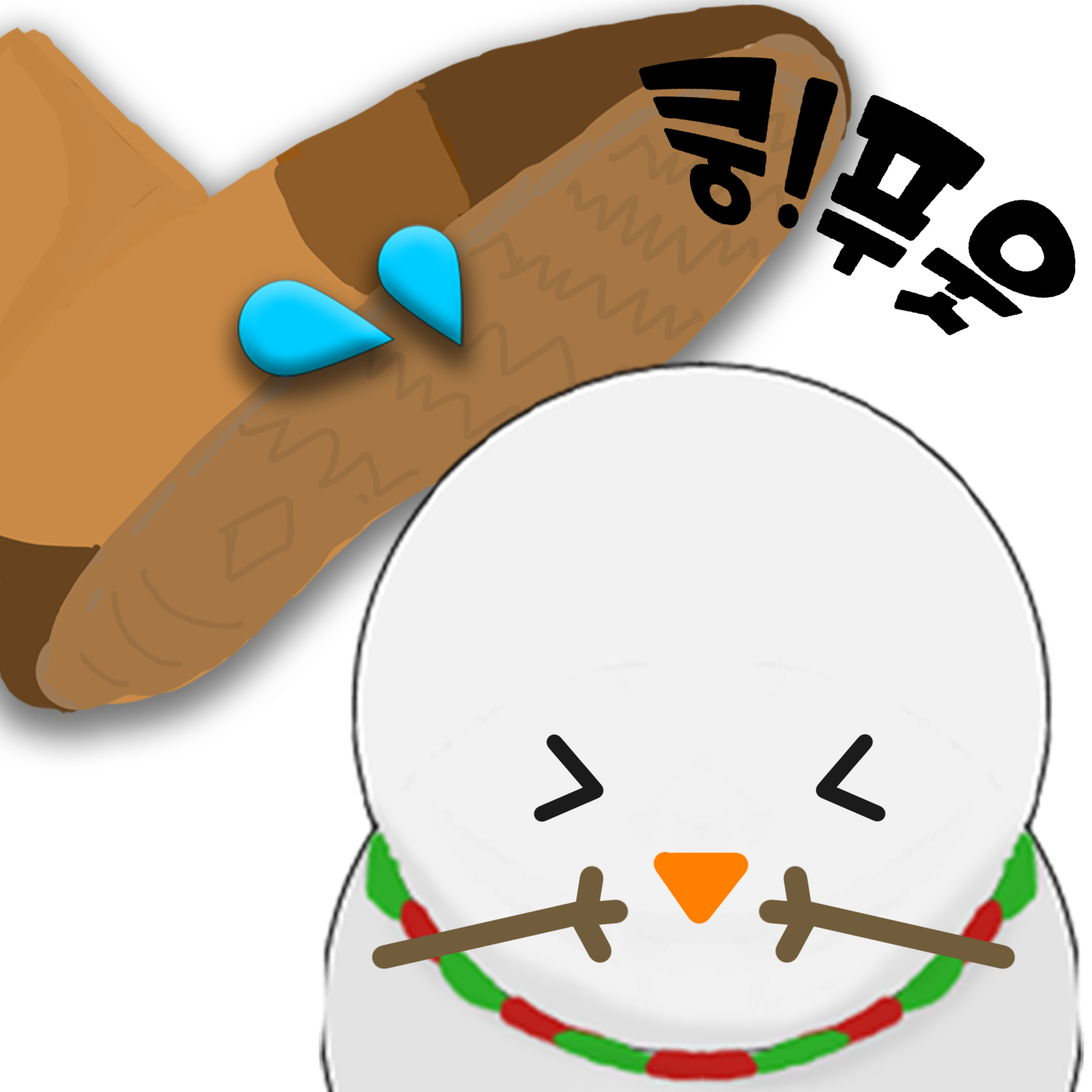
<style>
.page{position:relative;width:1092px;height:1092px;background:#f2f2f2}
.page>*{position:absolute;margin:0}
.t1{font:140.5px "CookieRun-Bold";letter-spacing:0.02em;color:#000000;scale:0.81 1}
</style>
<div class="page">
<p class="t1" style="left:638px;top:56px;width:438px;height:280px;rotate:27deg">쿵!푸웃</p>
</div>
